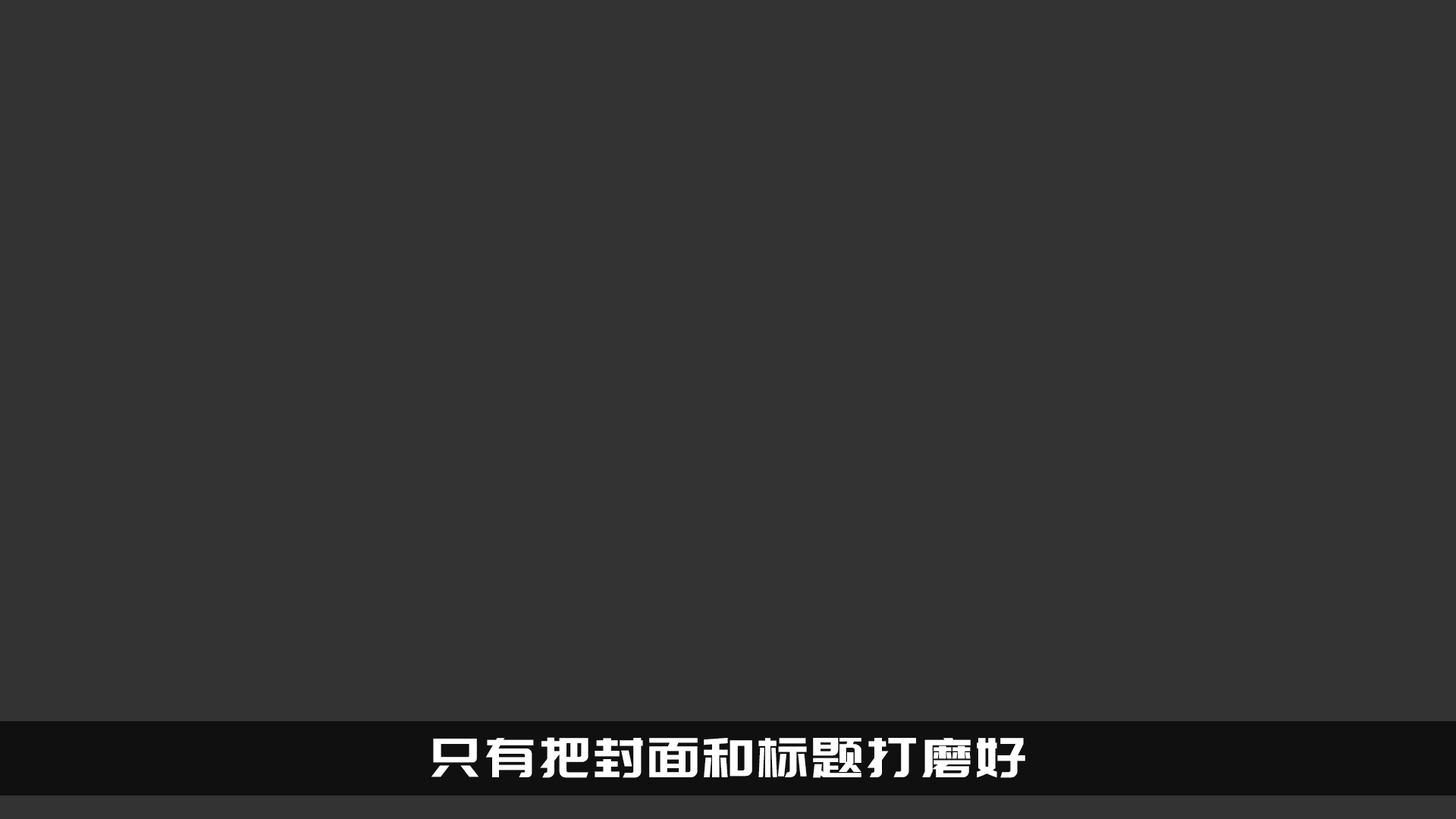
<style>
.page{position:relative;width:1456px;height:819px;background:#333333}
.page>*{position:absolute;margin:0}
.t1{font:54.6px "PangMenZhengDao-3";color:#ffffff}
</style>
<div class="page">
<p class="t1" style="left:431px;top:737px;width:594px;height:41px">只有把封面和标题打磨好</p>
</div>
